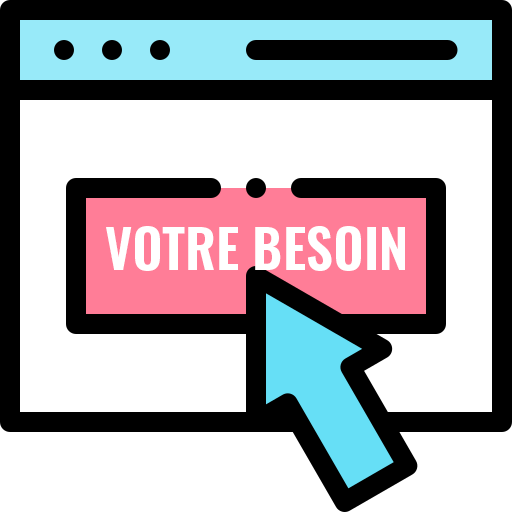
<style>
.page{position:relative;width:512px;height:512px;background:#ffffff}
.page>*{position:absolute;margin:0}
.t1{font:53px "Oswald-SemiBold";color:#ffffff}
</style>
<div class="page">
<p class="t1" style="left:106px;top:226px;width:299px;height:45px">VOTRE BESOIN</p>
</div>
